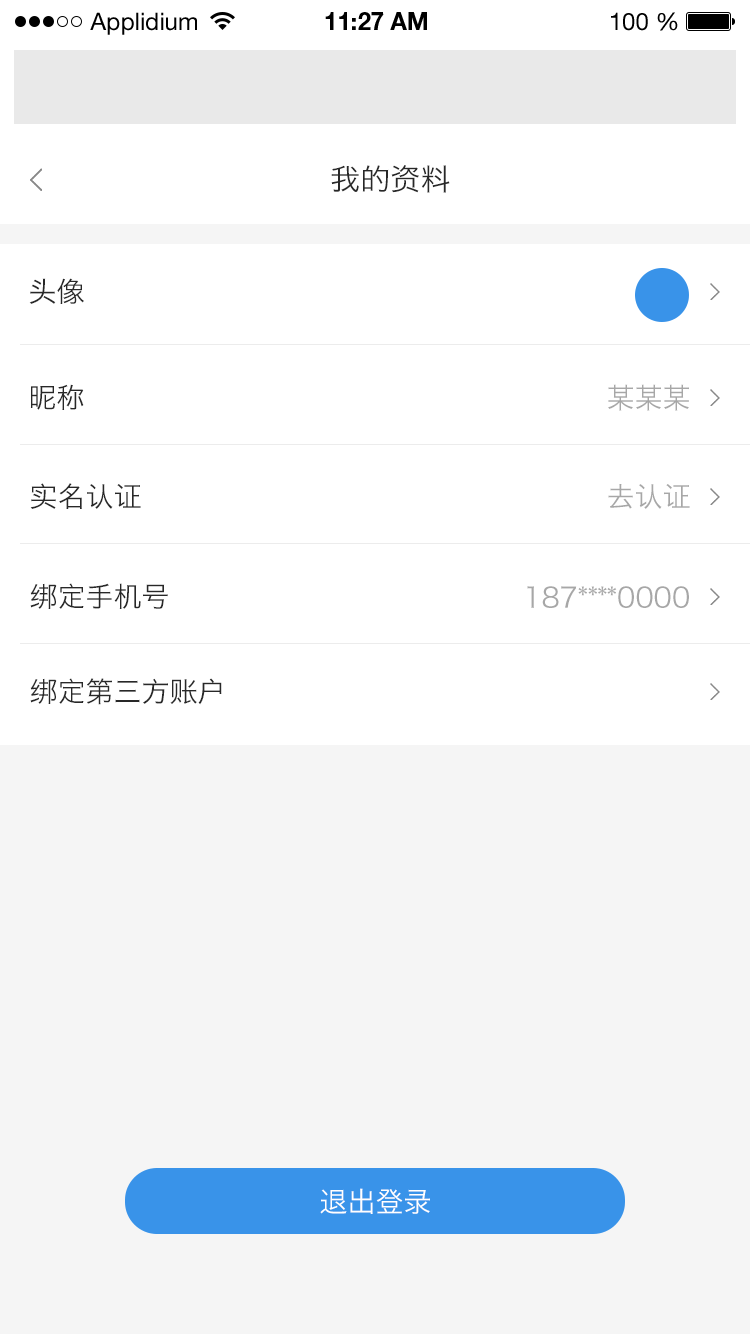
<style>
.page{position:relative;width:750px;height:1334px;background:#ffffff}
.page>*{position:absolute;margin:0}
.t1{font:24px "HelveticaNeueLTStd-Roman";color:#000000}
.t2{font:24px "HelveticaNeueLTStd-Bd";color:#000000}
.t3{font:30px "HiraginoSansGB-W3";color:#282828}
.t4{font:28px "HiraginoSansGB-W3";color:#282828}
.t5{font:28px "HiraginoSansGB-W3";color:#a7a7a7}
.t6{font:28px "HiraginoSansGB-W3";color:#ffffff}
</style>
<div class="page">
<p class="t1" style="left:90px;top:12px;width:107px;height:23px">Applidium</p>
<p class="t2" style="left:325px;top:12px;width:102px;height:18px">11:27 AM</p>
<p class="t1" style="left:611px;top:12px;width:67px;height:19px">100 %</p>
<p class="t3" style="left:331px;top:165px;width:119px;height:28px">我的资料</p>
<p class="t4" style="left:29px;top:278px;width:55px;height:26px">头像</p>
<p class="t4" style="left:30px;top:384px;width:54px;height:26px">昵称</p>
<p class="t5" style="left:608px;top:384px;width:81px;height:27px">某某某</p>
<p class="t4" style="left:30px;top:483px;width:111px;height:26px">实名认证</p>
<p class="t5" style="left:608px;top:484px;width:82px;height:25px">去认证</p>
<p class="t4" style="left:30px;top:583px;width:138px;height:26px">绑定手机号</p>
<p class="t5" style="left:527px;top:586px;width:162px;height:22px">187****0000</p>
<p class="t4" style="left:30px;top:678px;width:192px;height:27px">绑定第三方账户</p>
<p class="t6" style="left:320px;top:1188px;width:110px;height:26px">退出登录</p>
</div>
